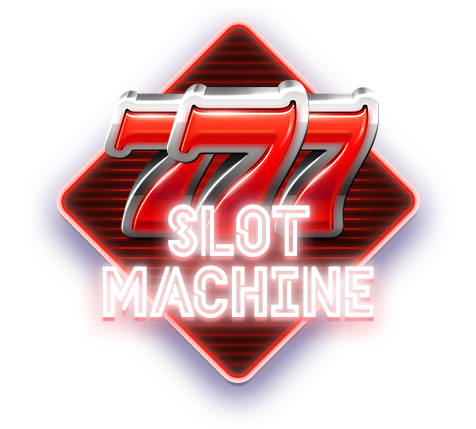
<style>
.page{position:relative;width:476px;height:429px;background:#ffffff}
.page>*{position:absolute;margin:0}
.t1{font:72px "HELLODENVERDISPLAYBOLD-Bold";color:#ffffff;text-transform:uppercase}
</style>
<div class="page">
<p class="t1" style="left:168px;top:204px;width:142px;height:53px">slot</p>
<p class="t1" style="left:102px;top:265px;width:272px;height:53px">Machine</p>
</div>
